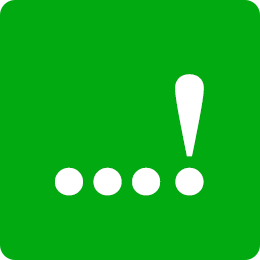
<style>
.page{position:relative;width:260px;height:260px;background:#01aa11}
.page>*{position:absolute;margin:0}
.t1{font:169.3px "Optima-Bold";letter-spacing:-0.05em;color:#ffffff}
</style>
<div class="page">
<p class="t1" style="left:55px;top:74px;width:149px;height:122px">...!</p>
</div>
